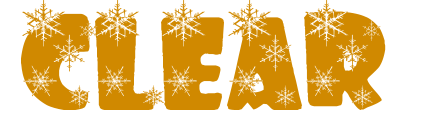
<style>
.page{position:relative;width:423px;height:128px;background:#ffffff}
.page>*{position:absolute;margin:0}
.t1{font:150px "winterflakes";color:#d08900}
</style>
<div class="page">
<p class="t1" style="left:21px;top:0px;width:365px;height:110px">CLEAR</p>
</div>
